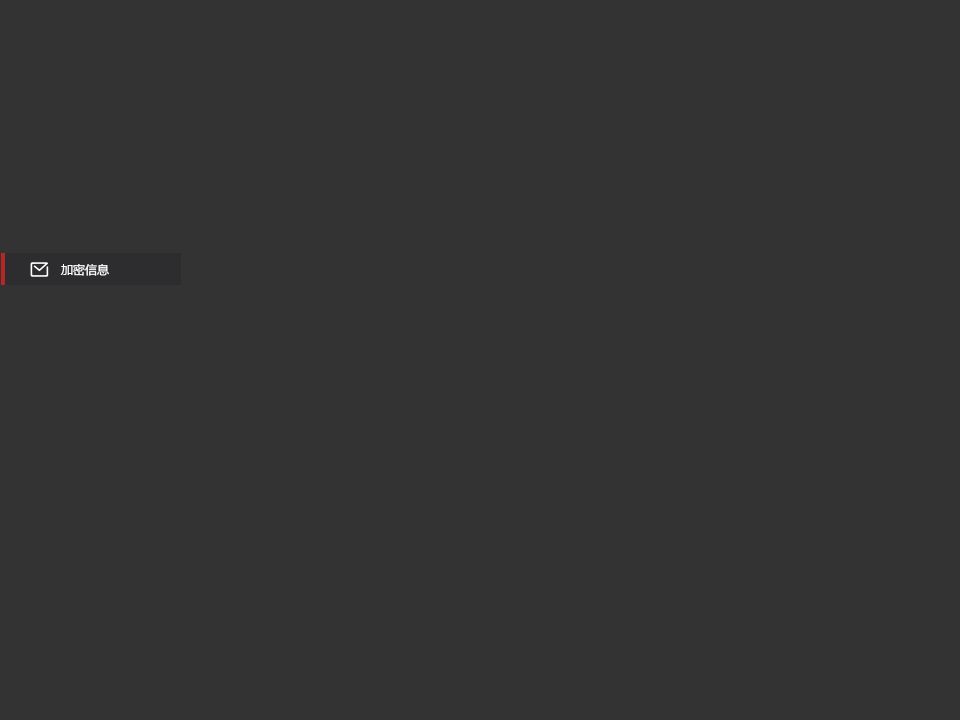
<style>
.page{position:relative;width:960px;height:720px;background:#333333}
.page>*{position:absolute;margin:0}
.t1{font:12px "MicrosoftYaHeiUI";color:#ffffff}
</style>
<div class="page">
<p class="t1" style="left:60px;top:264px;width:49px;height:12px">加密信息</p>
</div>
